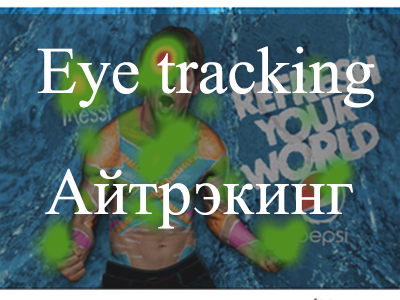
<style>
.page{position:relative;width:400px;height:300px}
.page>*{position:absolute;margin:0}
.t1{font:66.7px "TimesNewRomanPSMT";color:#ffffff}
</style>
<div class="page">
<p class="t1" style="left:37px;top:46px;width:338px;height:62px">Eye tracking</p>
<p class="t1" style="left:45px;top:168px;width:308px;height:61px">Айтрэкинг</p>
</div>
